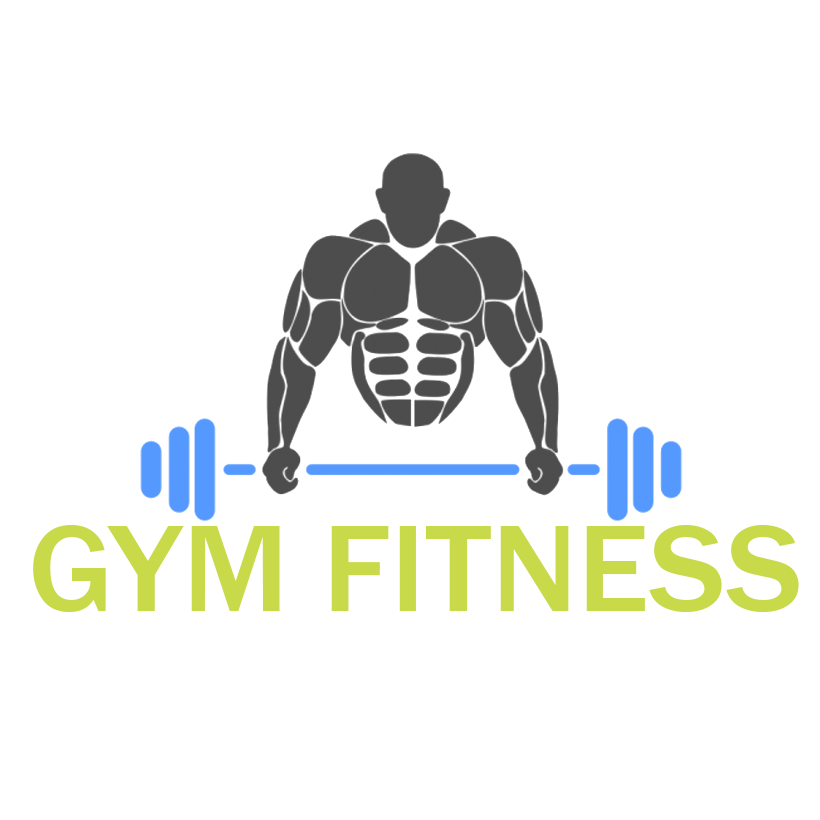
<style>
.page{position:relative;width:820px;height:820px;background:#ffffff}
.page>*{position:absolute;margin:0}
.t1{font:126.9px "FranklinGothic-Medium";color:#c8d94a;scale:1.05 1}
</style>
<div class="page">
<p class="t1" style="left:33px;top:525px;width:766px;height:87px">GYM FITNESS</p>
</div>
